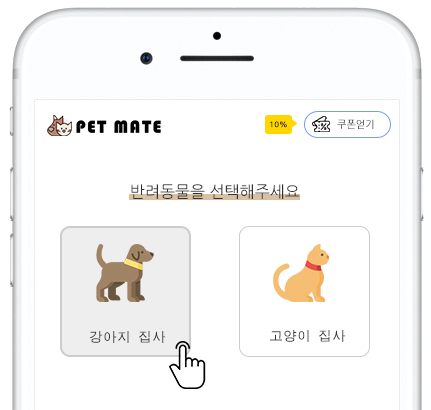
<style>
.page{position:relative;width:431px;height:410px;background:#ffffff}
.page>*{position:absolute;margin:0}
.t1{font:8px "NanumGothicBold"}
.t2{font:10px "NanumGothic"}
.t3{font:16px "NanumGothic";color:#333333}
.t4{font:14px "MDotum";color:#333333}
</style>
<div class="page">
<p class="t1" style="left:270px;top:121px;width:17px;height:7px">10%</p>
<p class="t2" style="left:337px;top:119px;width:37px;height:10px">쿠폰얻기</p>
<p class="t3" style="left:131px;top:184px;width:169px;height:15px">반려동물을 선택해주세요</p>
<p class="t4" style="left:90px;top:331px;width:76px;height:12px">강아지 집사</p>
<p class="t4" style="left:270px;top:330px;width:76px;height:12px">고양이 집사</p>
</div>
